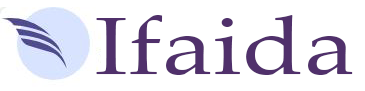
<style>
.page{position:relative;width:365px;height:91px;background:#ffffff}
.page>*{position:absolute;margin:0}
.t1{font:80.9px "PalatinoLinotype-Roman";color:#50306b;scale:1.25 1}
</style>
<div class="page">
<p class="t1" style="left:96px;top:15px;width:257px;height:60px">Ifaida</p>
</div>
